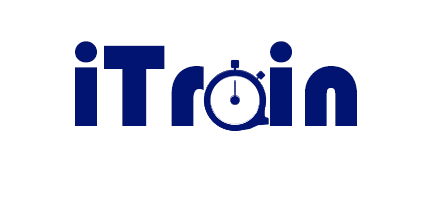
<style>
.page{position:relative;width:432px;height:216px;background:#ffffff}
.page>*{position:absolute;margin:0}
.t1{font:120px "Bauhaus93";color:#021472}
</style>
<div class="page">
<p class="t1" style="left:75px;top:41px;width:282px;height:85px">iTr  in</p>
</div>
